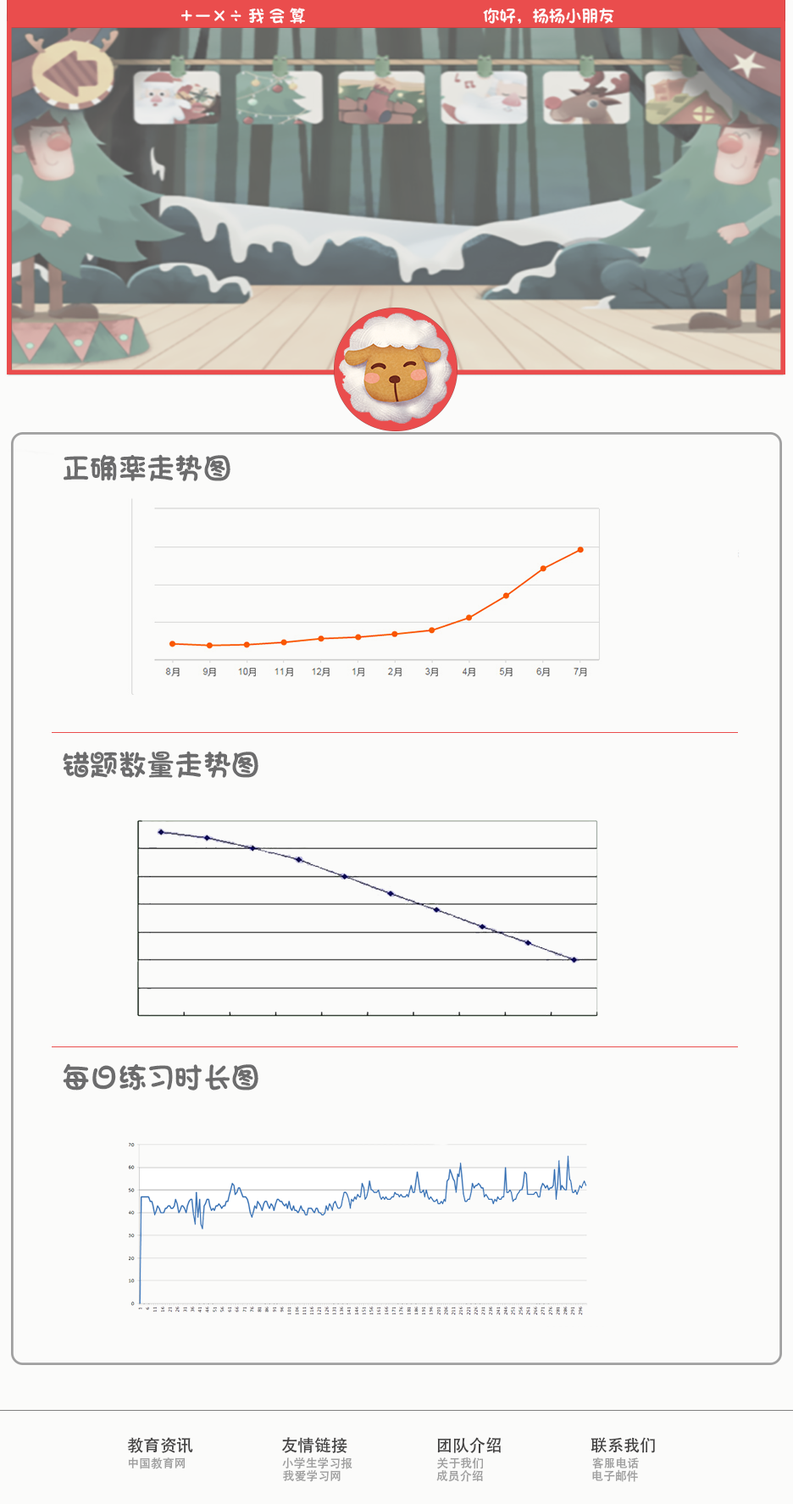
<style>
.page{position:relative;width:793px;height:1504px;background:#fbfbfa}
.page>*{position:absolute;margin:0}
.t1{font:16.5px "ARTianniuGB-Heavy";color:#fdfafa}
.t2{font:28.2px/16.5px "ARTianniuGB-Heavy";color:#6c6c6d}
.t3{font:11.8px/16.5px "AdobeHeitiStd-Regular";color:#a0a0a0}
.t4{font:16.5px/16.5px "AdobeHeitiStd-Regular";color:#444343}
</style>
<div class="page">
<p class="t1" style="left:181px;top:8px;width:433px;height:16px">＋－×÷ 我 会 算                                           你好，杨杨小朋友</p>
<p class="t2" style="left:63px;top:454px;width:195px;height:636px">正确率走势图<br><br><br><br><br><br><br><br><br><br><br><br><br><br><br><br><br><br>错题数量走势图<br><br><br><br><br><br><br><br><br><br><br><br><br><br><br><br><br><br><br>每日练习时长图</p>
<p class="t3" style="left:127px;top:1437px;width:528px;height:45px"><span class="t4">教育资讯                        友情链接                        团队介绍                        联系我们<br></span>中国教育网                          小学生学习报                                关于我们                                         客服电话<br>                                                           我爱学习网                                    成员介绍                                         电子邮件</p>
</div>
